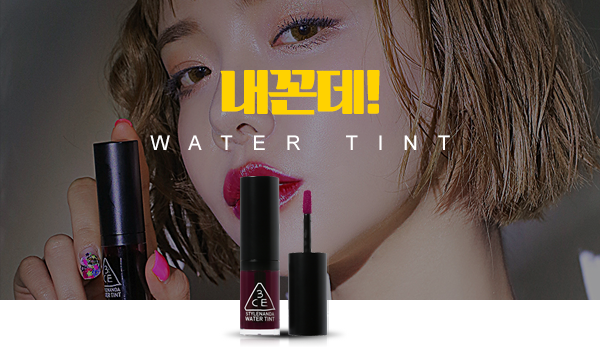
<style>
.page{position:relative;width:600px;height:360px}
.page>*{position:absolute;margin:0}
.t1{font:50px "KoreanBRSG-R";letter-spacing:-0.04em;color:#ffd200}
.t2{font:20px "ArialMT";letter-spacing:1em;color:#ffffff}
</style>
<div class="page">
<p class="t1" style="left:220px;top:70px;width:160px;height:45px">내꼰데!</p>
<p class="t2" style="left:150px;top:135px;width:300px;height:15px">WATER TINT</p>
</div>
